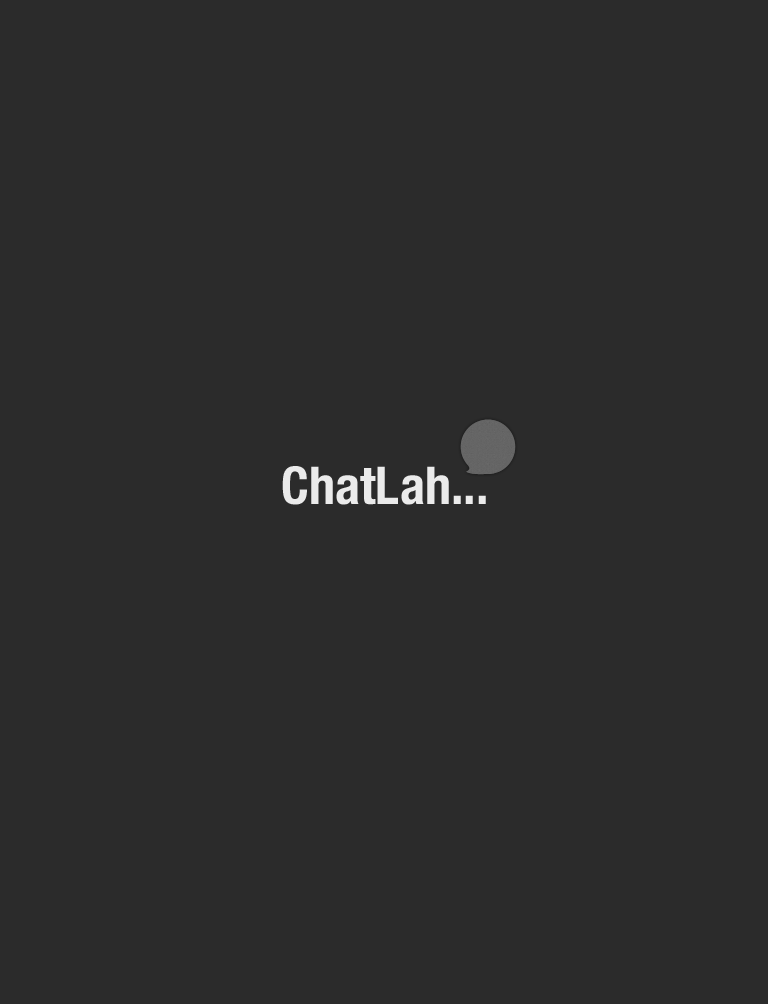
<style>
.page{position:relative;width:768px;height:1004px;background:#2b2b2b}
.page>*{position:absolute;margin:0}
.t1{font:52.1px "HelveticaNeue-CondensedBold";color:#ebebeb}
</style>
<div class="page">
<p class="t1" style="left:282px;top:466px;width:204px;height:39px">ChatLah...</p>
</div>
